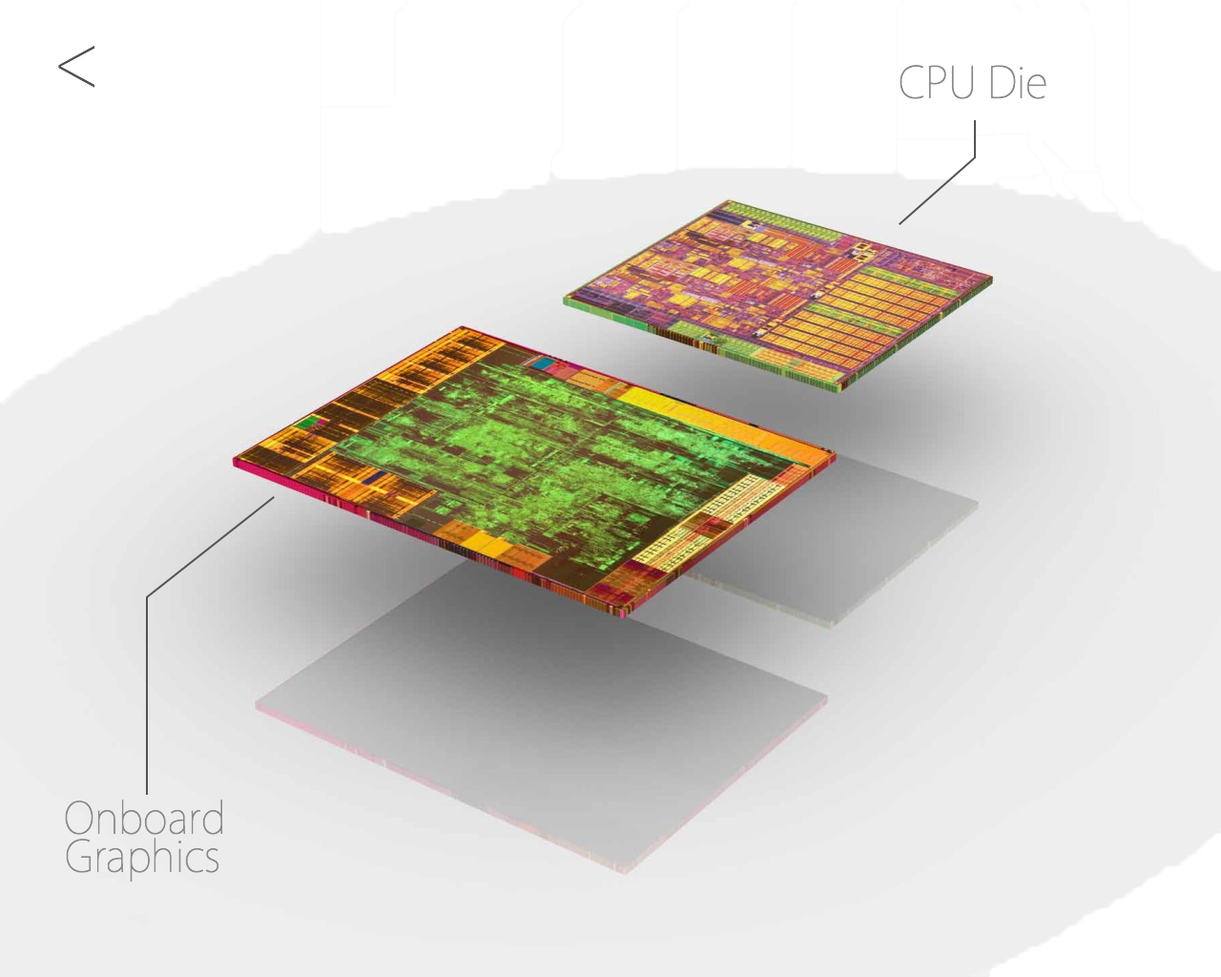
<style>
.page{position:relative;width:1221px;height:977px;background:#ffffff}
.page>*{position:absolute;margin:0}
.t1{font:79.5px "MyriadSetPro-Ultralight";color:#525252}
.t2{font:47.7px "MyriadSetPro-Ultralight";color:#8a8a8a}
</style>
<div class="page">
<p class="t1" style="left:58px;top:46px;width:37px;height:42px">&lt;</p>
<p class="t2" style="left:899px;top:65px;width:147px;height:34px">CPU Die</p>
<p class="t2" style="left:65px;top:799px;width:158px;height:36px">Onboard</p>
<p class="t2" style="left:66px;top:837px;width:153px;height:44px">Graphics</p>
</div>
